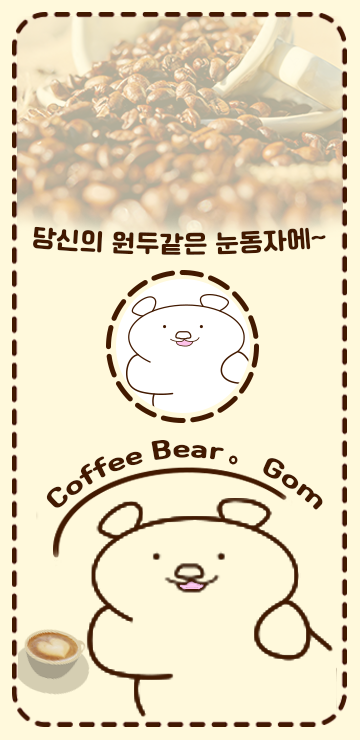
<style>
.page{position:relative;width:360px;height:740px;background:#fff9dc}
.page>*{position:absolute;margin:0}
.t1{font:25px "Cafe24Ssurround";color:#421900}
.t2{font:25px "NotoSansKR-Black";color:#421900}
</style>
<div class="page">
<p class="t1" style="left:33px;top:226px;width:293px;height:29px">당신의 원두같은 눈동자에~</p>
<p class="t1" style="left:46px;top:440px;width:277px;height:70px">Coffee Bear 。Gom</p>
<p class="t2" style="left:229px;top:455px;width:9px;height:10px">。</p>
</div>
